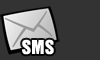
<style>
.page{position:relative;width:100px;height:60px;background:#333333}
.page>*{position:absolute;margin:0}
.t1{font:17.3px "HelveticaInseratCyr-Upright";color:#ffffff}
</style>
<div class="page">
<p class="t1" style="left:22px;top:39px;width:32px;height:16px">SMS</p>
</div>
